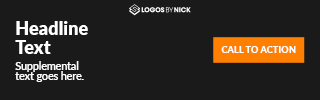
<style>
.page{position:relative;width:320px;height:100px;background:#1a1a1a}
.page>*{position:absolute;margin:0}
.t1{font:18.1px/18.5px "Lato-Black";color:#ffffff}
.t2{font:9.3px "Lato-Heavy";color:#ffffff}
.t3{font:10.5px/10.8px "Lato-Semibold";color:#ffffff}
</style>
<div class="page">
<p class="t1" style="left:15px;top:21px;width:73px;height:33px">Headline<br>Text</p>
<p class="t2" style="left:221px;top:46px;width:75px;height:7px">CALL TO ACTION</p>
<p class="t3" style="left:15px;top:61px;width:69px;height:21px">Supplemental<br>text goes here.</p>
</div>
